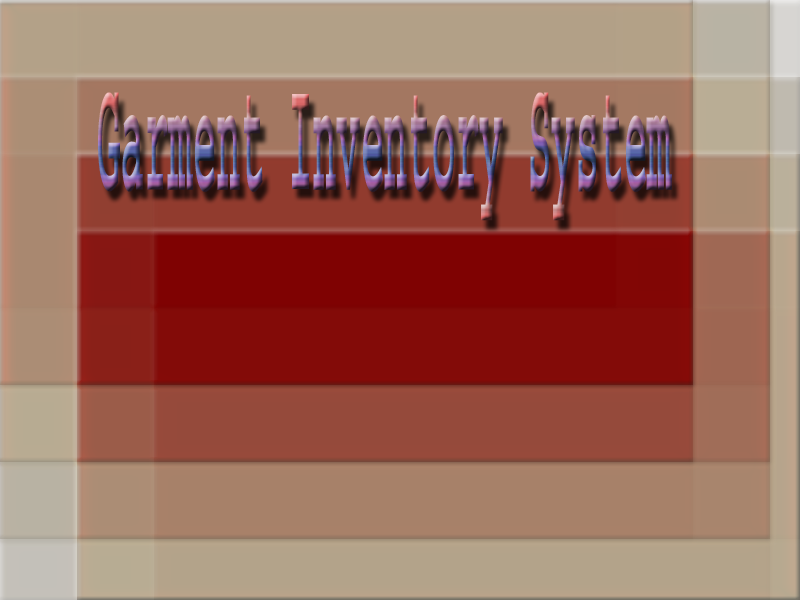
<style>
.page{position:relative;width:800px;height:600px}
.page>*{position:absolute;margin:0}
.t1{font:165.9px "Courier-Bold";scale:0.24 1}
</style>
<div class="page">
<p class="t1" style="left:98px;top:92px;width:574px;height:129px">Garment Inventory System</p>
</div>
